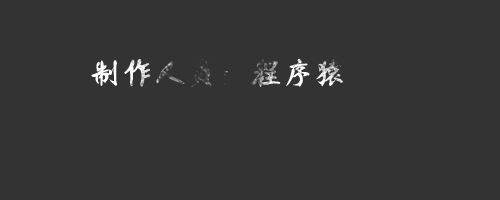
<style>
.page{position:relative;width:500px;height:200px;background:#333333}
.page>*{position:absolute;margin:0}
.t1{font:32px "HDZK--HSJHDTJ-01"}
</style>
<div class="page">
<p class="t1" style="left:91px;top:58px;width:252px;height:30px">制作人员：程序猿</p>
</div>
